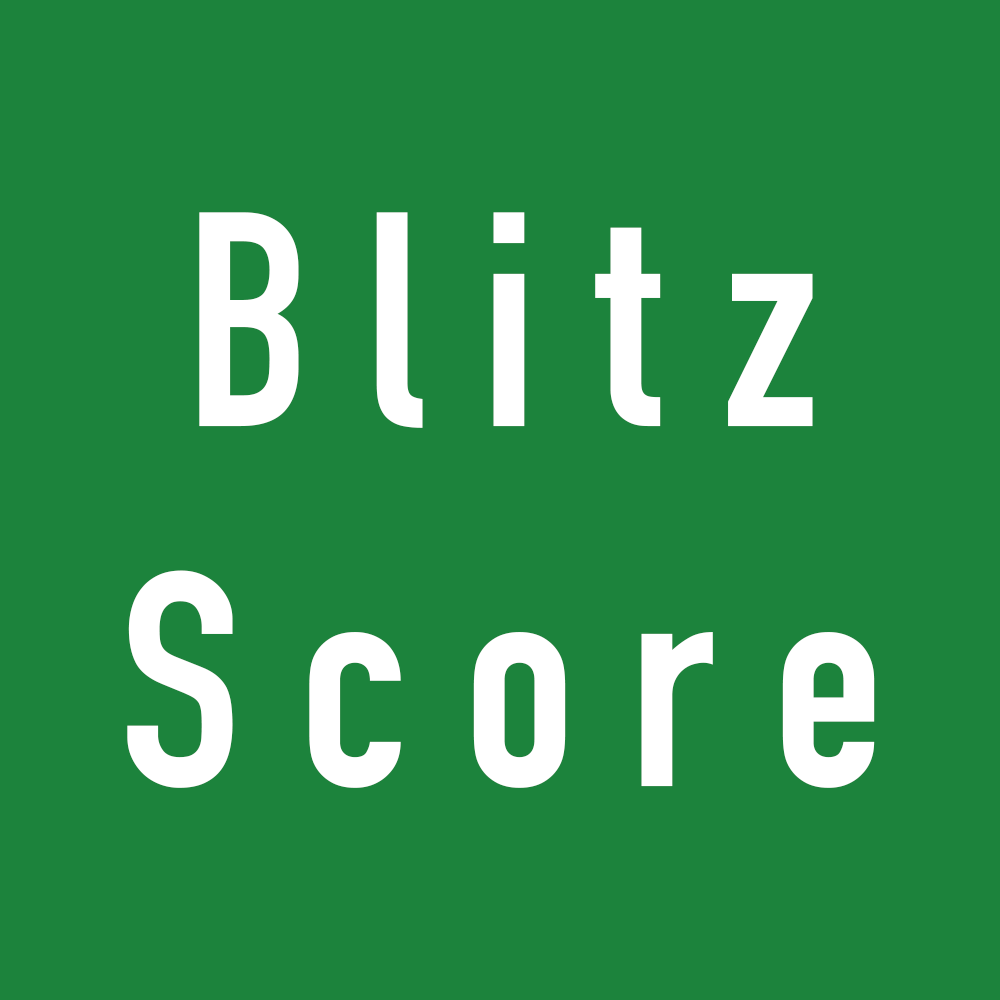
<style>
.page{position:relative;width:1000px;height:1000px;background:#1c833c}
.page>*{position:absolute;margin:0}
.t1{font:300px "DINCondensed-Bold";letter-spacing:0.2em;color:#ffffff}
</style>
<div class="page">
<p class="t1" style="left:127px;top:212px;width:748px;height:576px;text-align:center">Blitz<br>Score</p>
</div>
